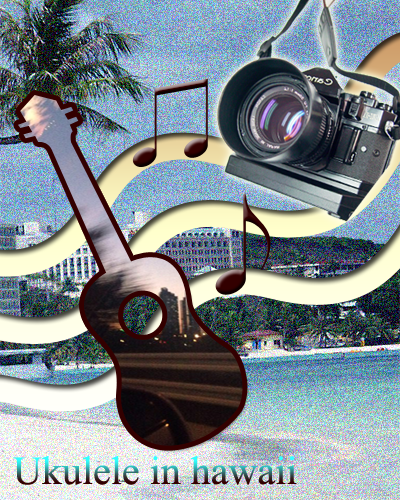
<style>
.page{position:relative;width:400px;height:500px}
.page>*{position:absolute;margin:0}
.t1{font:40px "TimesNewRomanPSMT"}
</style>
<div class="page">
<p class="t1" style="left:13px;top:456px;width:284px;height:29px">Ukulele in hawaii</p>
</div>
